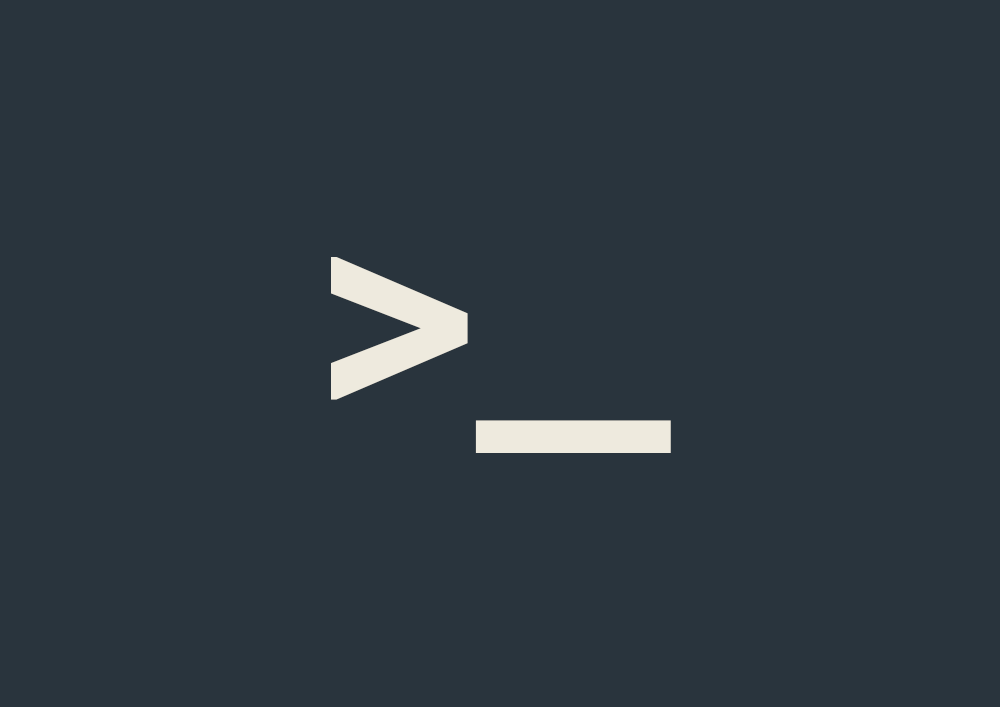
<style>
.page{position:relative;width:1000px;height:707px;background:#29343d}
.page>*{position:absolute;margin:0}
.t1{font:270.8px "FilsonProBold";color:#eeeade}
</style>
<div class="page">
<p class="t1" style="left:331px;top:257px;width:340px;height:196px">&gt;_</p>
</div>
